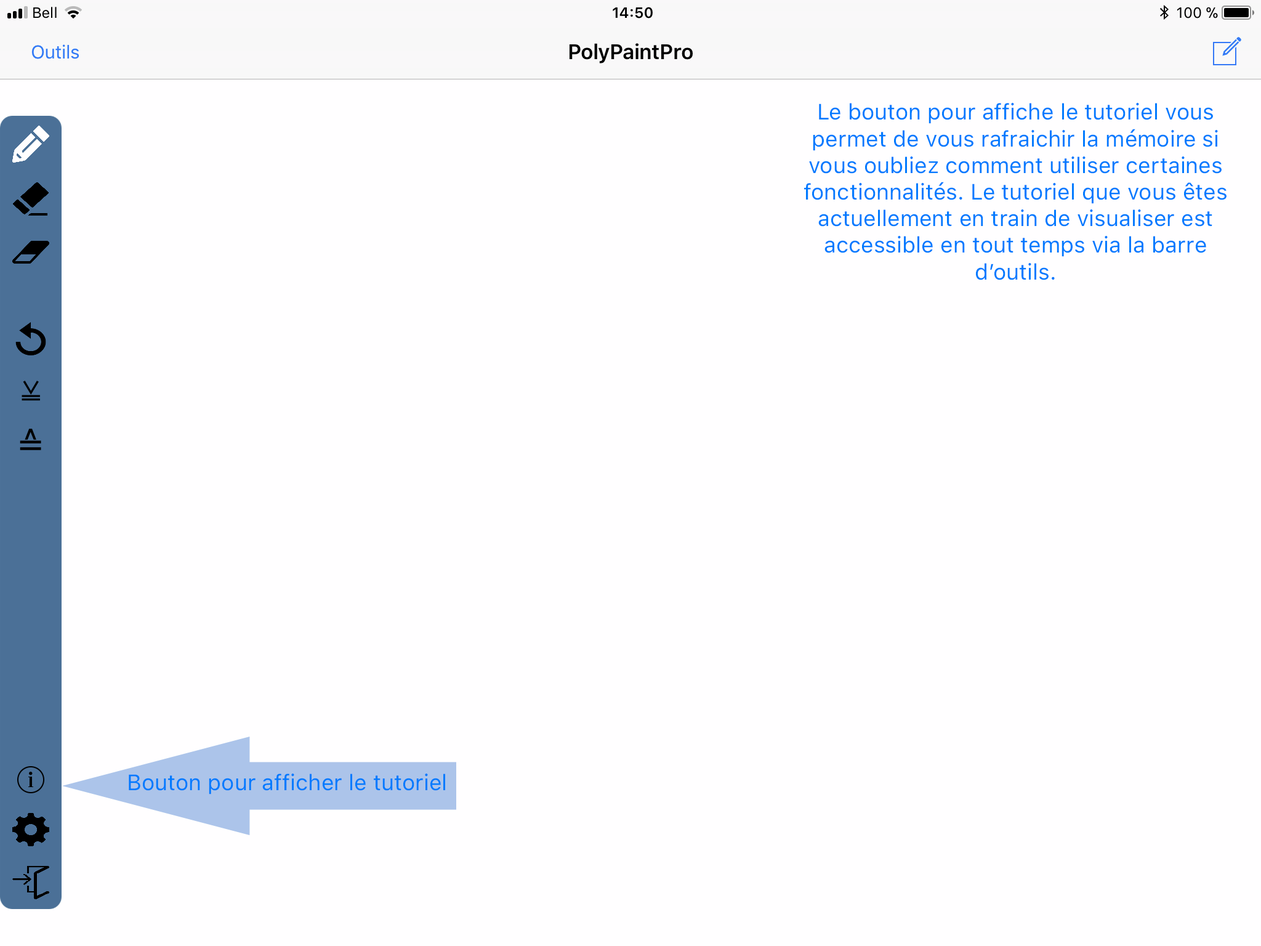
<style>
.page{position:relative;width:1261px;height:946px;background:#fffeff}
.page>*{position:absolute;margin:0}
.t1{font:22.2px "SFProText-Regular";color:#007aff}
</style>
<div class="page">
<p class="t1" style="left:804px;top:103px;width:422px;height:177px;text-align:center">Le bouton pour affiche le tutoriel vous permet de vous rafraichir la mémoire si vous oubliez comment utiliser certaines fonctionnalités. Le tutoriel que vous êtes actuellement en train de visualiser est accessible en tout temps via la barre d’outils.</p>
<p class="t1" style="left:129px;top:773px;width:316px;height:21px">Bouton pour afficher le tutoriel</p>
</div>
